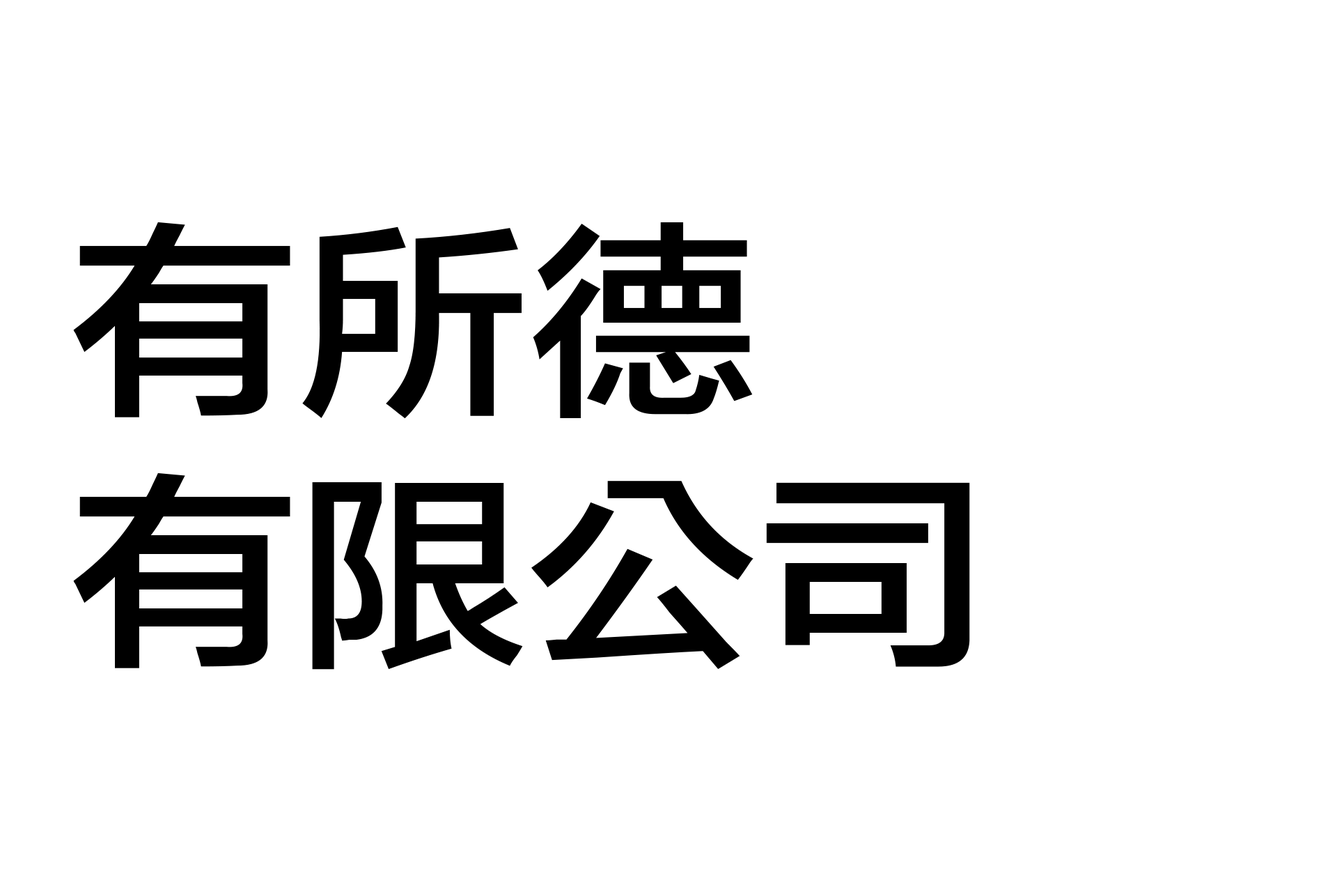
<style>
.page{position:relative;width:1337px;height:892px;background:#ffffff}
.page>*{position:absolute;margin:0}
.t1{font:209px "FZLTZHB--B51-0";color:#000000;text-transform:uppercase;scale:1.1 1}
</style>
<div class="page">
<p class="t1" style="left:73px;top:222px;width:897px;height:447px">有所德<br>有限公司</p>
</div>
